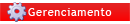
<style>
.page{position:relative;width:130px;height:24px;background:#ffffff}
.page>*{position:absolute;margin:0}
.t1{font:11px "TrebuchetMS";letter-spacing:0.06em;color:#ffffff}
</style>
<div class="page">
<p class="t1" style="left:28px;top:8px;width:84px;height:8px">Gerenciamento</p>
</div>
